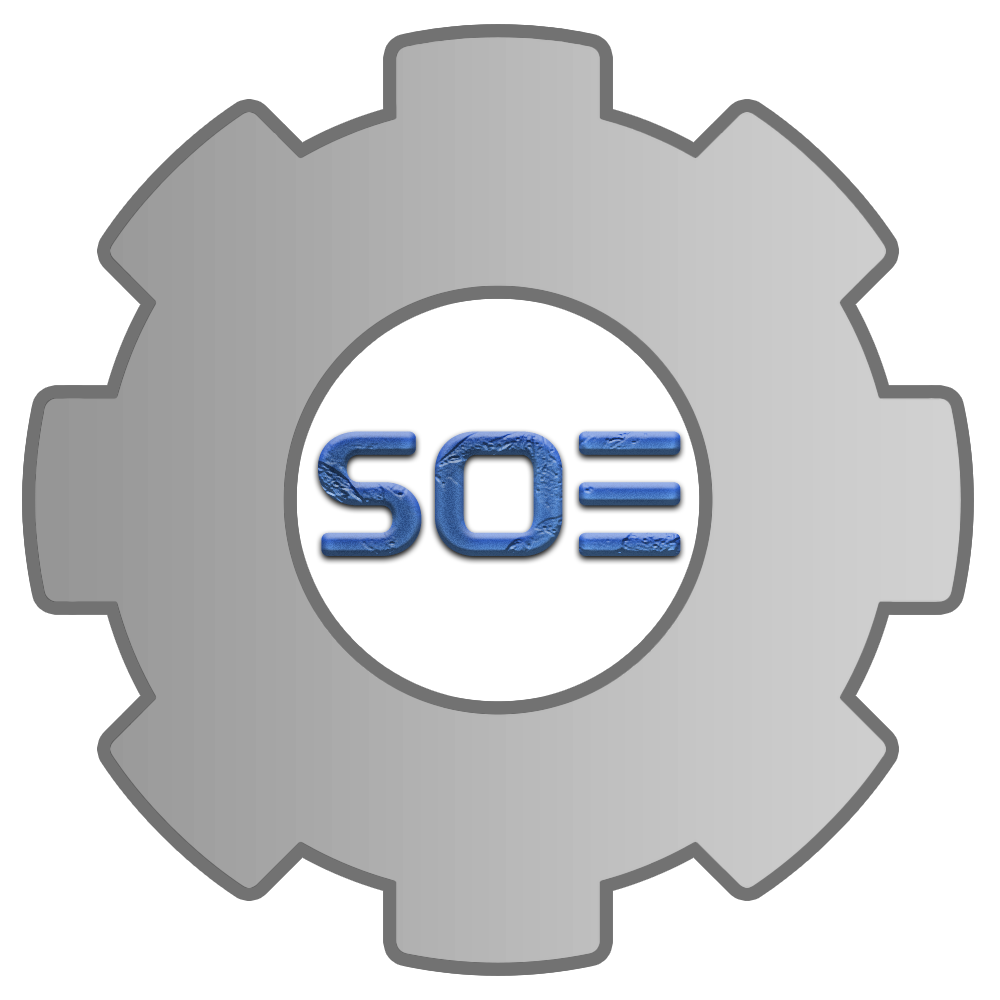
<style>
.page{position:relative;width:1000px;height:1000px;background:#ffffff}
.page>*{position:absolute;margin:0}
.t1{font:177.8px "TeqtoDemo-Regular"}
</style>
<div class="page">
<p class="t1" style="left:318px;top:431px;width:363px;height:125px">SOE</p>
</div>
